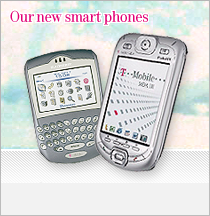
<style>
.page{position:relative;width:210px;height:216px}
.page>*{position:absolute;margin:0}
.t1{font:16px "Tele-Antiqua";color:#e20074}
</style>
<div class="page">
<p class="t1" style="left:10px;top:10px;width:138px;height:15px">Our new smart phones</p>
</div>
